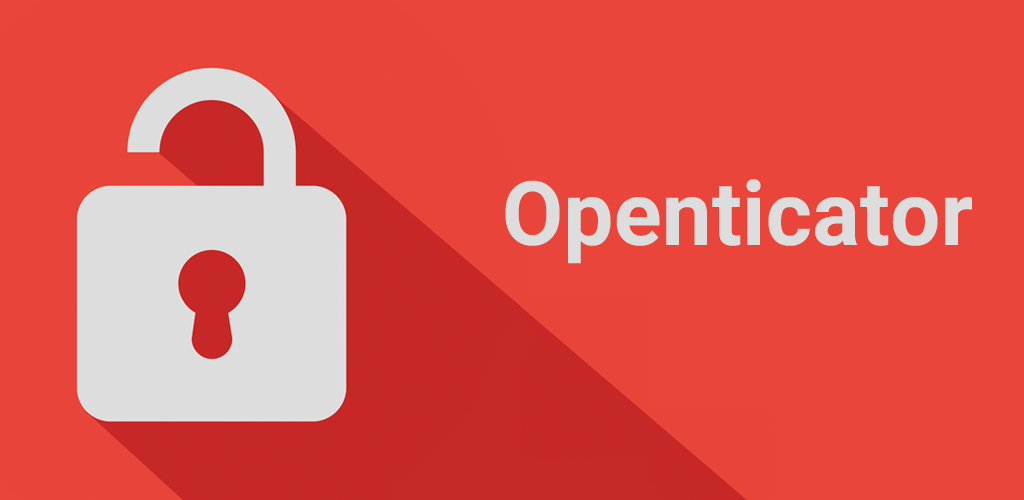
<style>
.page{position:relative;width:1024px;height:500px;background:#e9453a}
.page>*{position:absolute;margin:0}
.t1{font:89.2px "Roboto-Bold";color:#dddddd}
</style>
<div class="page">
<p class="t1" style="left:505px;top:179px;width:467px;height:85px">Openticator</p>
</div>
